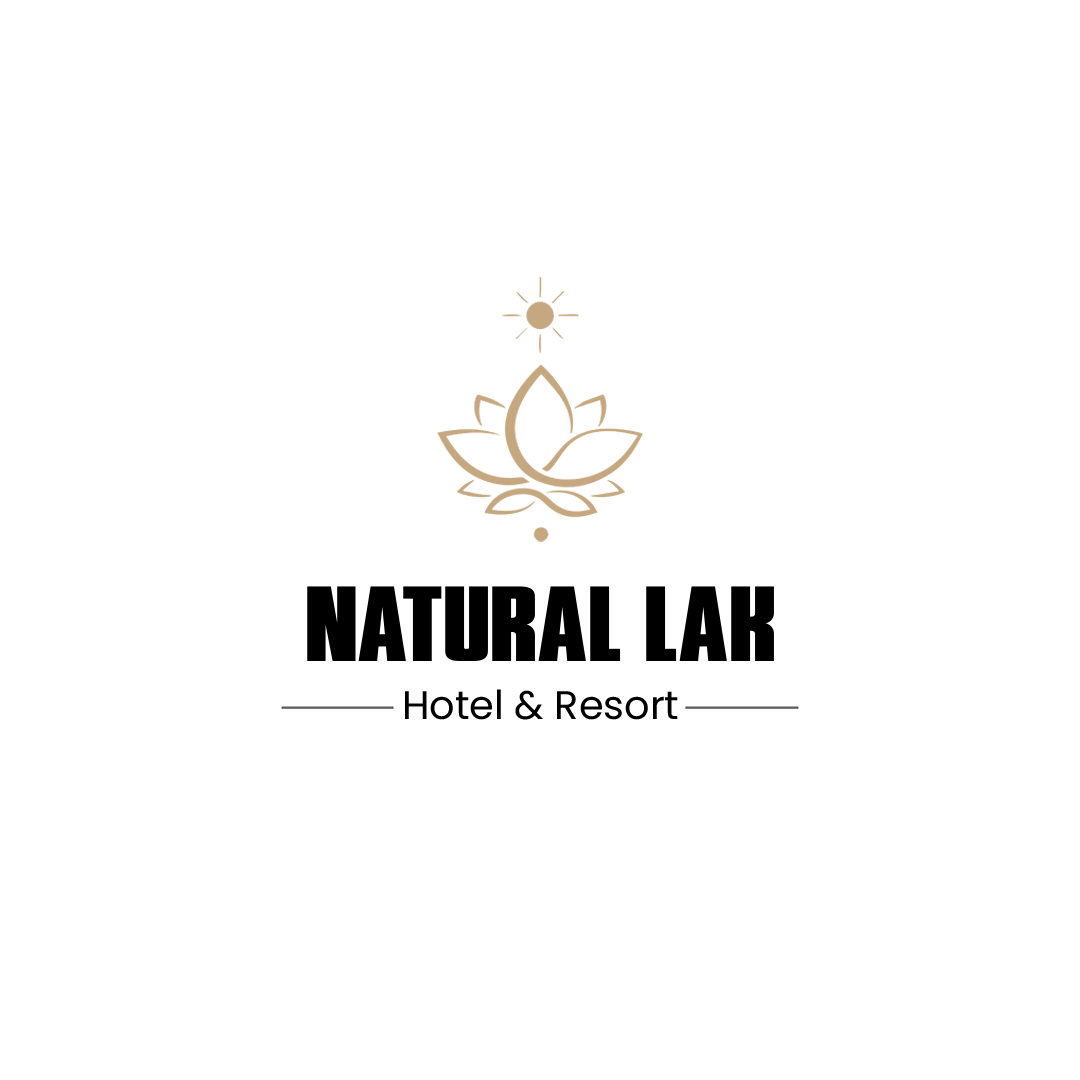
<style>
.page{position:relative;width:1080px;height:1080px;background:#ffffff}
.page>*{position:absolute;margin:0}
.t1{font:39.8px/57.6px "Poppins-Regular";color:#000000}
.t2{font:101.8px/57.6px "PhenomiconExpanded";color:#000000}
</style>
<div class="page">
<p class="t1" style="left:307px;top:586px;width:467px;height:134px;text-align:center"><span class="t2">Natural Lak<br></span>Hotel &amp; Resort</p>
</div>
